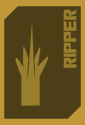
<style>
.page{position:relative;width:85px;height:125px;background:#4c3f17}
.page>*{position:absolute;margin:0}
.t1{font:20px "TransformersMovie";color:#997e2e}
.t2{font:20px "TransformersMovie";letter-spacing:0.04em;color:#997e2e}
.t3{font:20px "TransformersMovie";letter-spacing:0.02em;color:#997e2e}
</style>
<div class="page">
<p class="t1" style="left:63px;top:9px;width:14px;height:59px;rotate:-90deg"><span class="t2">r</span>i<span class="t2">p</span><span class="t3">p</span>er</p>
</div>
